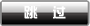
<style>
.page{position:relative;width:90px;height:26px}
.page>*{position:absolute;margin:0}
.t1{font:14px "DFZongYi-Bd-80-Win-GB";color:#ffffff}
</style>
<div class="page">
<p class="t1" style="left:24px;top:6px;width:42px;height:13px">跳  过</p>
</div>
